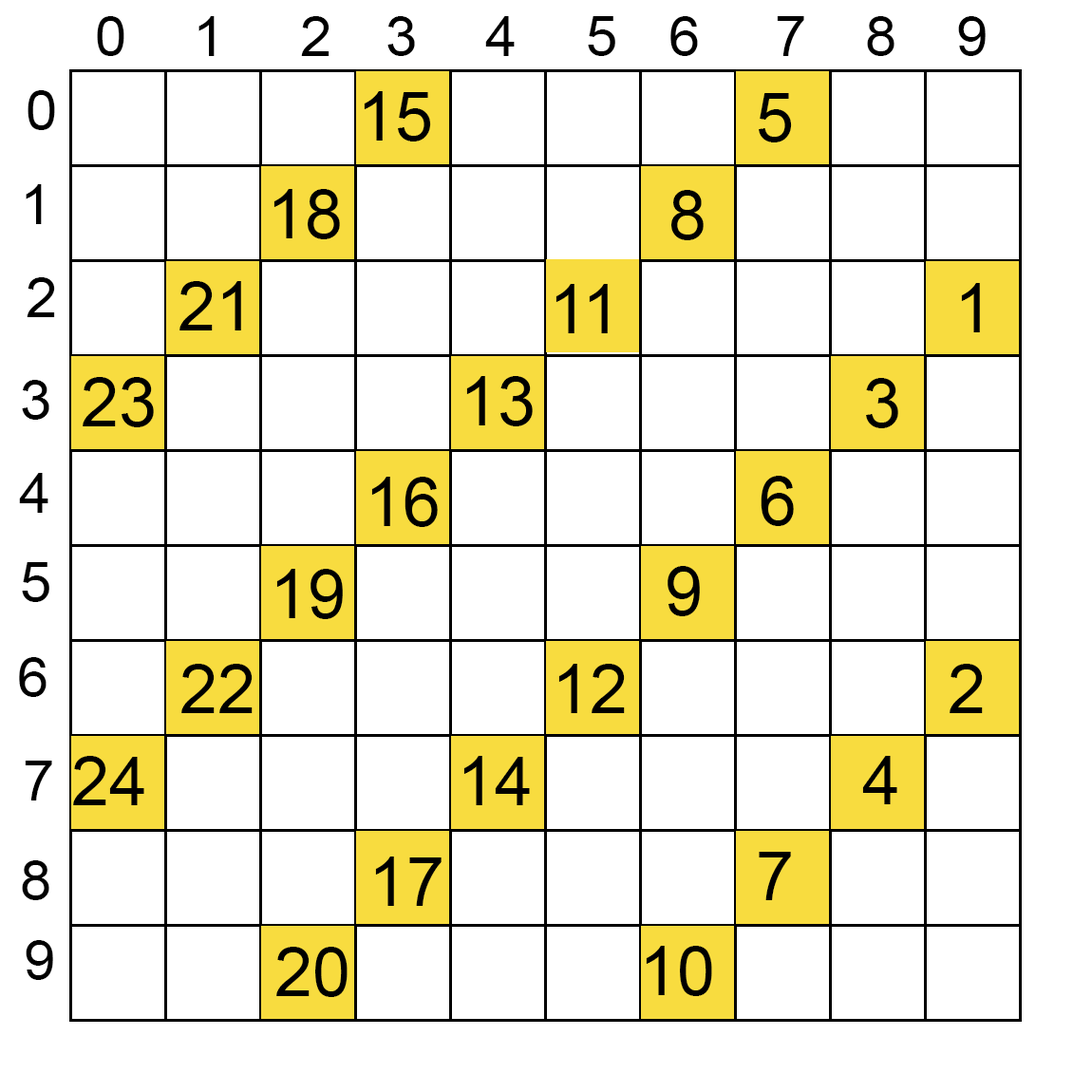
<style>
.page{position:relative;width:1092px;height:1092px;background:#ffffff}
.page>*{position:absolute;margin:0}
.t1{font:57px "ArialMT";color:#000000}
.t2{font:68.4px "ArialMT";color:#000000}
</style>
<div class="page">
<p class="t1" style="left:97px;top:16px;width:27px;height:40px">0</p>
<p class="t1" style="left:198px;top:16px;width:17px;height:40px">1</p>
<p class="t1" style="left:301px;top:16px;width:28px;height:40px">2</p>
<p class="t1" style="left:387px;top:16px;width:28px;height:40px">3</p>
<p class="t1" style="left:485px;top:16px;width:30px;height:40px">4</p>
<p class="t1" style="left:588px;top:16px;width:27px;height:40px">5</p>
<p class="t1" style="left:670px;top:16px;width:28px;height:40px">6</p>
<p class="t1" style="left:777px;top:16px;width:27px;height:40px">7</p>
<p class="t1" style="left:867px;top:16px;width:27px;height:40px">8</p>
<p class="t1" style="left:958px;top:16px;width:28px;height:40px">9</p>
<p class="t1" style="left:28px;top:90px;width:27px;height:40px">0</p>
<p class="t2" style="left:364px;top:91px;width:67px;height:50px">15</p>
<p class="t2" style="left:759px;top:93px;width:33px;height:49px">5</p>
<p class="t1" style="left:26px;top:184px;width:16px;height:40px">1</p>
<p class="t2" style="left:273px;top:189px;width:67px;height:50px">18</p>
<p class="t2" style="left:671px;top:190px;width:33px;height:50px">8</p>
<p class="t1" style="left:27px;top:277px;width:28px;height:40px">2</p>
<p class="t2" style="left:179px;top:281px;width:62px;height:49px">21</p>
<p class="t2" style="left:555px;top:284px;width:53px;height:49px">11</p>
<p class="t2" style="left:961px;top:283px;width:19px;height:49px">1</p>
<p class="t2" style="left:83px;top:377px;width:71px;height:50px">23</p>
<p class="t2" style="left:466px;top:376px;width:67px;height:50px">13</p>
<p class="t2" style="left:866px;top:378px;width:32px;height:50px">3</p>
<p class="t1" style="left:22px;top:380px;width:27px;height:40px">3</p>
<p class="t1" style="left:19px;top:473px;width:29px;height:40px">4</p>
<p class="t2" style="left:371px;top:477px;width:67px;height:50px">16</p>
<p class="t2" style="left:761px;top:476px;width:33px;height:50px">6</p>
<p class="t1" style="left:22px;top:562px;width:27px;height:40px">5</p>
<p class="t2" style="left:276px;top:569px;width:67px;height:50px">19</p>
<p class="t2" style="left:668px;top:566px;width:32px;height:50px">9</p>
<p class="t1" style="left:19px;top:657px;width:28px;height:40px">6</p>
<p class="t2" style="left:181px;top:664px;width:72px;height:49px">22</p>
<p class="t2" style="left:558px;top:664px;width:67px;height:49px">12</p>
<p class="t2" style="left:950px;top:664px;width:33px;height:49px">2</p>
<p class="t1" style="left:25px;top:761px;width:27px;height:39px">7</p>
<p class="t2" style="left:73px;top:756px;width:71px;height:49px">24</p>
<p class="t2" style="left:463px;top:756px;width:67px;height:49px">14</p>
<p class="t2" style="left:862px;top:756px;width:35px;height:48px">4</p>
<p class="t2" style="left:375px;top:856px;width:67px;height:50px">17</p>
<p class="t2" style="left:759px;top:852px;width:32px;height:48px">7</p>
<p class="t1" style="left:22px;top:860px;width:27px;height:40px">8</p>
<p class="t1" style="left:26px;top:940px;width:27px;height:40px">9</p>
<p class="t2" style="left:276px;top:947px;width:72px;height:50px">20</p>
<p class="t2" style="left:646px;top:946px;width:66px;height:50px">10</p>
</div>
